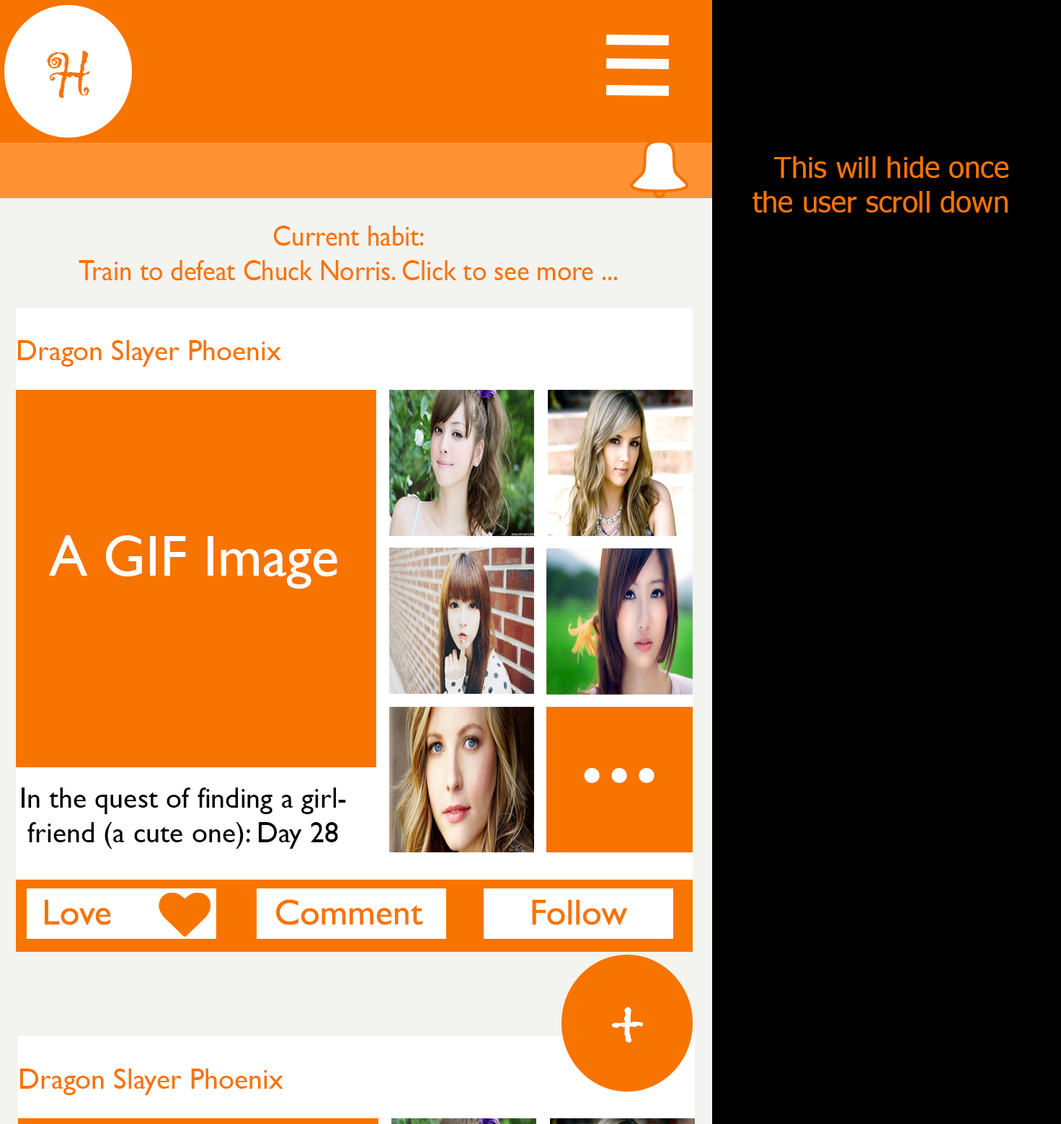
<style>
.page{position:relative;width:1061px;height:1124px;background:#000000}
.page>*{position:absolute;margin:0}
.t1{font:66.4px "Gigi-Regular";color:#f87401;scale:0.93 1}
.t2{font:28.8px "Tahoma";color:#f87401}
.t3{font:28.8px "GillSansMT";color:#f87401;scale:0.92 1}
.t4{font:28.8px "GillSansMT";color:#f87401}
.t5{font:57.6px "GillSansMT";color:#ffffff}
.t6{font:124.7px "GillSansMT";color:#ffffff}
.t7{font:28.8px "GillSansMT";color:#000000}
.t8{font:36px "GillSansMT";color:#f87401}
.t9{font:95.7px "Gigi-Regular";color:#ffffff;scale:0.93 1}
</style>
<div class="page">
<p class="t1" style="left:47px;top:50px;width:43px;height:49px">H</p>
<p class="t2" style="left:752px;top:156px;width:256px;height:57px;text-align:right">This will hide once the user scroll down</p>
<p class="t3" style="left:79px;top:226px;width:539px;height:54px;text-align:center">Current habit: <br>Train to defeat Chuck Norris. Click to see more ...</p>
<p class="t4" style="left:18px;top:340px;width:263px;height:27px">Dragon Slayer Phoenix</p>
<p class="t5" style="left:49px;top:535px;width:288px;height:54px">A GIF Image</p>
<p class="t6" style="left:584px;top:768px;width:70px;height:15px">...</p>
<p class="t7" style="left:22px;top:788px;width:324px;height:61px;text-align:center">In the quest of finding a girlfriend (a cute one): Day 28</p>
<p class="t8" style="left:45px;top:899px;width:66px;height:26px">Love</p>
<p class="t8" style="left:276px;top:899px;width:147px;height:26px">Comment</p>
<p class="t8" style="left:532px;top:899px;width:96px;height:26px">Follow</p>
<p class="t9" style="left:611px;top:1007px;width:32px;height:36px">+</p>
<p class="t4" style="left:20px;top:1069px;width:263px;height:26px">Dragon Slayer Phoenix</p>
</div>
